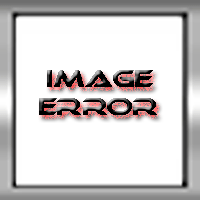
<style>
.page{position:relative;width:200px;height:200px;background:#ffffff}
.page>*{position:absolute;margin:0}
.t1{font:23px "Ethnocentric"}
</style>
<div class="page">
<p class="t1" style="left:39px;top:70px;width:118px;height:45px;text-align:center">Image<br>Error</p>
</div>
